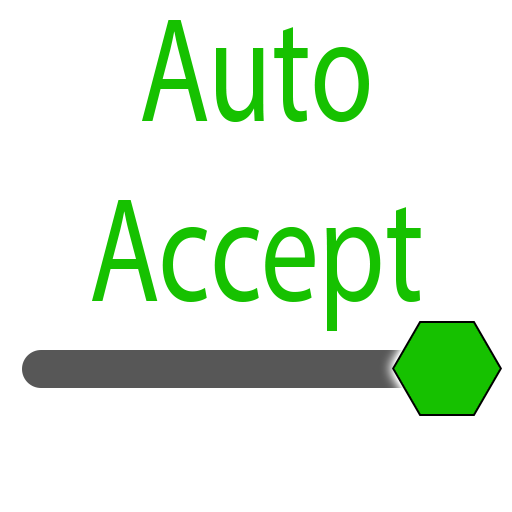
<style>
.page{position:relative;width:512px;height:512px;background:#ffffff}
.page>*{position:absolute;margin:0}
.t1{font:150px "MyriadPro-Regular";color:#16c100;scale:0.77 1}
</style>
<div class="page">
<p class="t1" style="left:92px;top:20px;width:329px;height:311px;text-align:center">Auto<br>Accept</p>
</div>
